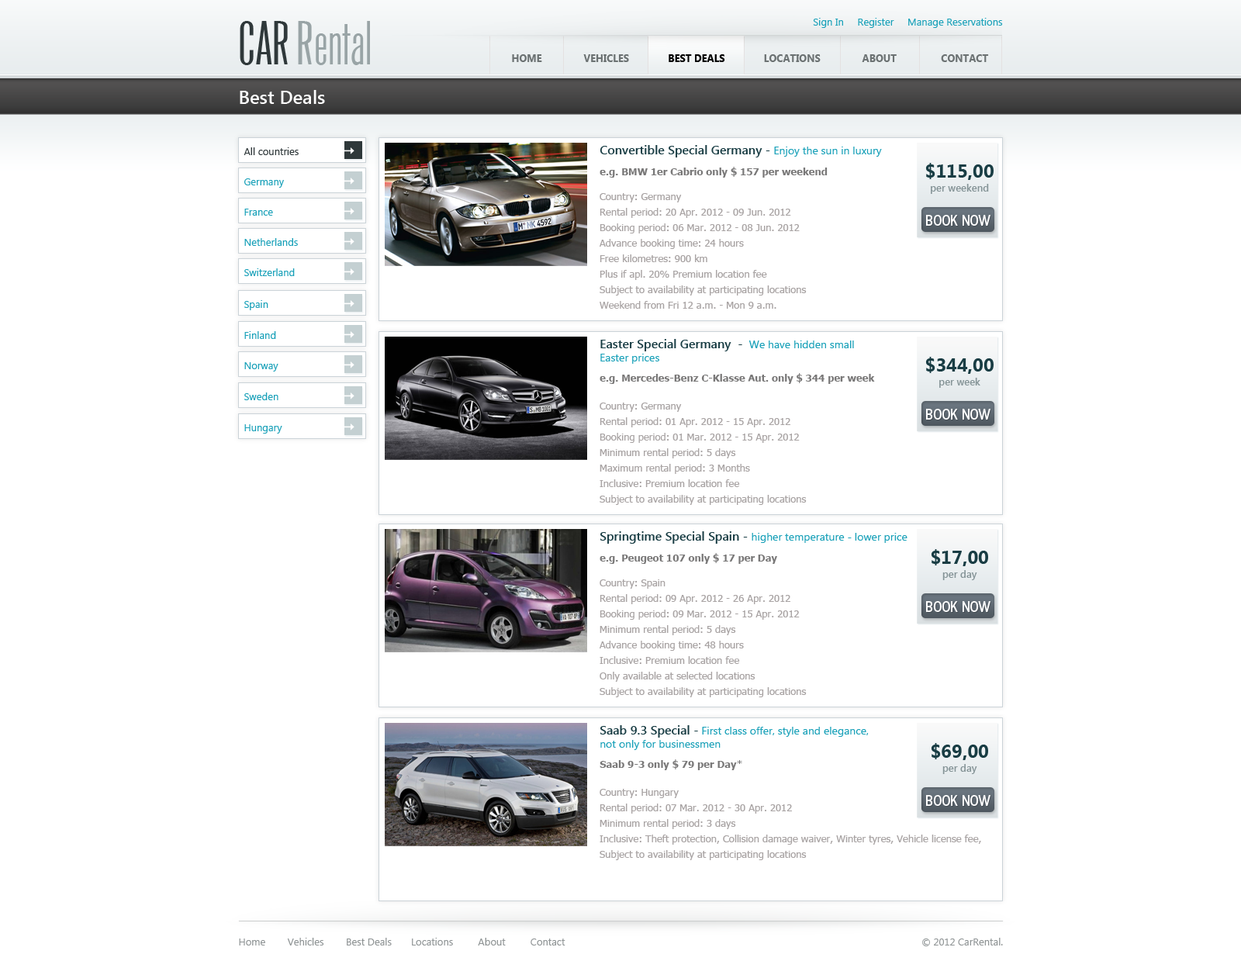
<style>
.page{position:relative;width:1241px;height:961px;background:#ffffff}
.page>*{position:absolute;margin:0}
.t1{font:10.1px "SegoeUI";color:#1aa1b9}
.t2{font:55.8px "Arizona";color:#99a4a6}
.t3{font:55.8px "Arizona";color:#2f383a;text-transform:uppercase}
.t4{font:10.1px "SegoeUI-Bold";color:#6c7273;text-transform:uppercase}
.t5{font:10.1px "SegoeUI-Bold";color:#000000;text-transform:uppercase}
.t6{font:18.6px "SegoeUI-SemiBold";color:#fefefe}
.t7{font:10.1px "SegoeUI";color:#2f383a}
.t8{font:12.4px "SegoeUI-SemiBold";color:#193d44}
.t9{font:10.9px "SegoeUI";color:#1aa1b9}
.t10{font:10.1px "Tahoma-Bold";color:#797878}
.t11{font:10.1px/14px "SegoeUI-SemiBold";color:#859497}
.t12{font:18.6px/14px "SegoeUI-Bold";color:#193d44}
.t13{font:10.1px/15.5px "Tahoma";color:#a9a4a4}
.t14{font:14px "AvantGardeITCbyBT-MediumCond";color:#ffffff;text-transform:uppercase}
.t15{font:10.1px "SegoeUI";color:#909596}
</style>
<div class="page">
<p class="t1" style="left:813px;top:18px;width:190px;height:10px">Sign In     Register     Manage Reservations</p>
<p class="t2" style="left:240px;top:21px;width:130px;height:44px"><span class="t3">Car</span> Rental</p>
<p class="t4" style="left:512px;top:54px;width:477px;height:8px">Home               Vehicles              <span class="t5">Best Deals </span>             Locations               About                Contact</p>
<p class="t6" style="left:240px;top:90px;width:85px;height:14px">Best Deals</p>
<p class="t7" style="left:244px;top:147px;width:55px;height:8px">All countries</p>
<p class="t8" style="left:600px;top:145px;width:282px;height:12px">Convertible Special Germany - <span class="t9">Enjoy the sun in luxury</span></p>
<p class="t10" style="left:600px;top:167px;width:228px;height:11px">e.g. BMW 1er Cabrio only $ 157 per weekend</p>
<p class="t11" style="left:925px;top:163px;width:69px;height:31px;text-align:center"><span class="t12">$115,00<br></span>per weekend</p>
<p class="t1" style="left:244px;top:178px;width:40px;height:10px">Germany</p>
<p class="t13" style="left:600px;top:193px;width:207px;height:116px">Country: Germany<br>Rental period: 20 Apr. 2012 - 09 Jun. 2012<br>Booking period: 06 Mar. 2012 - 08 Jun. 2012<br>Advance booking time: 24 hours<br>Free kilometres: 900 km<br>Plus if apl. 20% Premium location fee<br>Subject to availability at participating locations<br>Weekend from Fri 12 a.m. - Mon 9 a.m.</p>
<p class="t1" style="left:244px;top:209px;width:29px;height:7px">France</p>
<p class="t14" style="left:926px;top:215px;width:64px;height:11px">Book Now</p>
<p class="t1" style="left:244px;top:238px;width:54px;height:8px">Netherlands</p>
<p class="t1" style="left:244px;top:268px;width:51px;height:8px">Switzerland</p>
<p class="t1" style="left:244px;top:300px;width:24px;height:10px">Spain</p>
<p class="t1" style="left:244px;top:331px;width:32px;height:8px">Finland</p>
<p class="t9" style="left:600px;top:339px;width:254px;height:25px"><span class="t8">Easter Special Germany  - </span> We have hidden small <br>Easter prices</p>
<p class="t1" style="left:244px;top:362px;width:34px;height:9px">Norway</p>
<p class="t11" style="left:925px;top:357px;width:69px;height:31px;text-align:center"><span class="t12">$344,00<br></span>per week</p>
<p class="t10" style="left:600px;top:373px;width:275px;height:11px">e.g. Mercedes-Benz C-Klasse Aut. only $ 344 per week</p>
<p class="t1" style="left:244px;top:392px;width:34px;height:8px">Sweden</p>
<p class="t13" style="left:600px;top:403px;width:207px;height:102px">Country: Germany<br>Rental period: 01 Apr. 2012 - 15 Apr. 2012<br>Booking period: 01 Mar. 2012 - 15 Apr. 2012<br>Minimum rental period: 5 days<br>Maximum rental period: 3 Months<br>Inclusive: Premium location fee<br>Subject to availability at participating locations</p>
<p class="t14" style="left:926px;top:409px;width:64px;height:11px">Book Now</p>
<p class="t1" style="left:244px;top:424px;width:38px;height:10px">Hungary</p>
<p class="t9" style="left:600px;top:531px;width:307px;height:13px"><span class="t8">Springtime Special Spain - </span>higher temperature - lower price</p>
<p class="t10" style="left:600px;top:553px;width:177px;height:11px">e.g. Peugeot 107 only $ 17 per Day</p>
<p class="t11" style="left:931px;top:549px;width:57px;height:31px;text-align:center"><span class="t12">$17,00<br></span>per day</p>
<p class="t13" style="left:600px;top:579px;width:207px;height:118px">Country: Spain<br>Rental period: 09 Apr. 2012 - 26 Apr. 2012<br>Booking period: 09 Mar. 2012 - 15 Apr. 2012<br>Minimum rental period: 5 days<br>Advance booking time: 48 hours<br>Inclusive: Premium location fee<br>Only available at selected locations<br>Subject to availability at participating locations</p>
<p class="t14" style="left:926px;top:601px;width:64px;height:11px">Book Now</p>
<p class="t9" style="left:600px;top:725px;width:269px;height:25px"><span class="t8">Saab 9.3 Special -</span> First class offer, style and elegance, <br>not only for businessmen</p>
<p class="t11" style="left:931px;top:743px;width:57px;height:31px;text-align:center"><span class="t12">$69,00<br></span>per day</p>
<p class="t10" style="left:600px;top:759px;width:142px;height:11px">Saab 9-3 only $ 79 per Day*</p>
<p class="t13" style="left:600px;top:789px;width:381px;height:71px">Country: Hungary<br>Rental period: 07 Mar. 2012 - 30 Apr. 2012<br>Minimum rental period: 3 days<br>Inclusive: Theft protection, Collision damage waiver, Winter tyres, Vehicle license fee, <br>Subject to availability at participating locations</p>
<p class="t14" style="left:926px;top:795px;width:64px;height:11px">Book Now</p>
<p class="t15" style="left:239px;top:938px;width:326px;height:7px">Home        Vehicles        Best Deals       Locations         About         Contact</p>
<p class="t15" style="left:922px;top:938px;width:81px;height:8px">© 2012 CarRental.</p>
</div>
